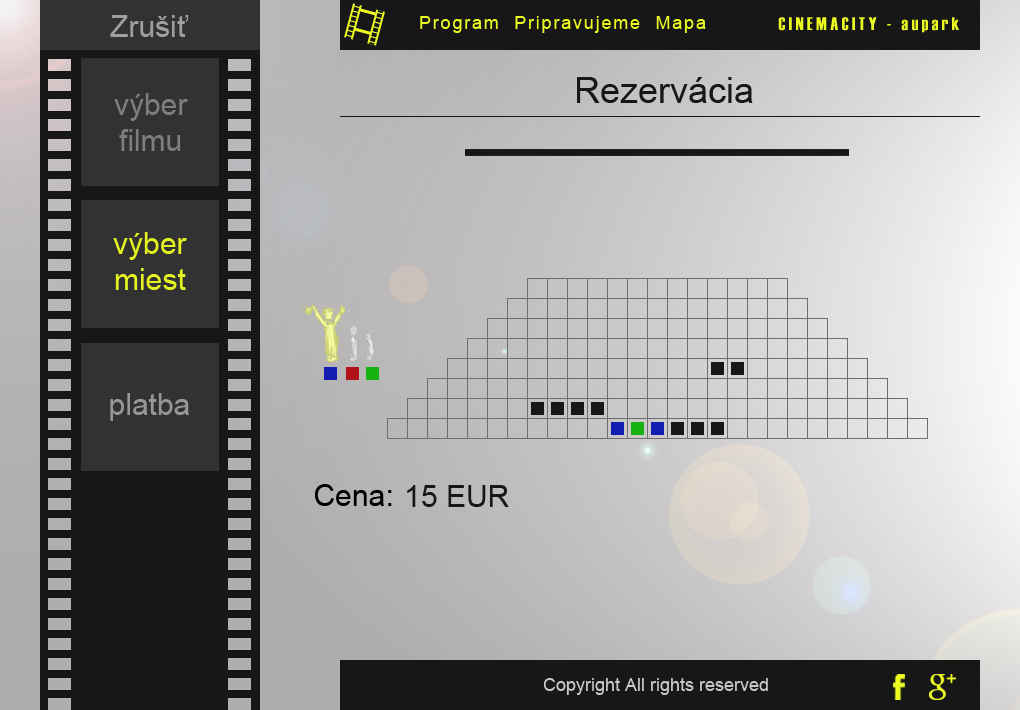
<style>
.page{position:relative;width:1020px;height:710px}
.page>*{position:absolute;margin:0}
.t1{font:30px "ArialMT";color:#9f9f9f}
.t2{font:18px "ArialMT";letter-spacing:0.1em;color:#ebfa20}
.t3{font:18px "Haettenschweiler";letter-spacing:0.2em;color:#ebfa20}
.t4{font:36px "ArialMT";color:#171717}
.t5{font:30px "ArialMT";color:#7e7e7e}
.t6{font:30px "ArialMT";color:#e5f420}
.t7{font:30px "ArialMT";color:#979797}
.t8{font:30px "ArialMT";color:#000000}
.t9{font:30px "ArialMT";color:#171717}
.t10{font:18px "ArialMT";color:#c8c8c8}
</style>
<div class="page">
<p class="t1" style="left:110px;top:15px;width:79px;height:22px">Zrušiť</p>
<p class="t2" style="left:420px;top:16px;width:286px;height:17px">Program  Pripravujeme  Mapa</p>
<p class="t3" style="left:778px;top:17px;width:181px;height:16px">CINEMACITY - aupark</p>
<p class="t4" style="left:577px;top:77px;width:176px;height:26px">Rezervácia</p>
<p class="t5" style="left:114px;top:93px;width:74px;height:58px;text-align:center">výber<br>filmu</p>
<p class="t6" style="left:113px;top:232px;width:74px;height:58px;text-align:center">výber miest</p>
<p class="t7" style="left:110px;top:393px;width:79px;height:28px">platba</p>
<p class="t8" style="left:315px;top:484px;width:77px;height:22px">Cena:</p>
<p class="t9" style="left:407px;top:485px;width:102px;height:22px">15 EUR</p>
<p class="t10" style="left:543px;top:678px;width:225px;height:17px">Copyright All rights reserved</p>
</div>
